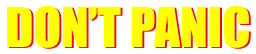
<style>
.page{position:relative;width:256px;height:54px;background:#ffff00}
.page>*{position:absolute;margin:0}
.t1{font:51px "Impact";color:#ffff00}
</style>
<div class="page">
<p class="t1" style="left:7px;top:5px;width:242px;height:43px">DON’T PANIC</p>
</div>
